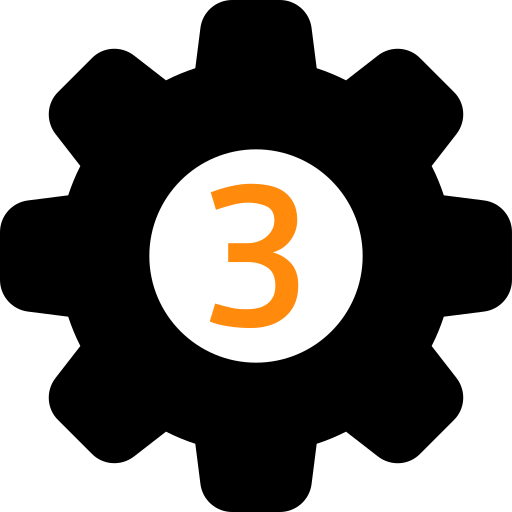
<style>
.page{position:relative;width:512px;height:512px;background:#000000}
.page>*{position:absolute;margin:0}
.t1{font:200px "GyeonggiTitleM";color:#ff8a0c}
.t2{font:200px "GyeonggiTitleM"}
</style>
<div class="page">
<p class="t1" style="left:209px;top:183px;width:90px;height:145px">3</p>
<p class="t2" style="left:211px;top:183px;width:90px;height:143px">2</p>
</div>
